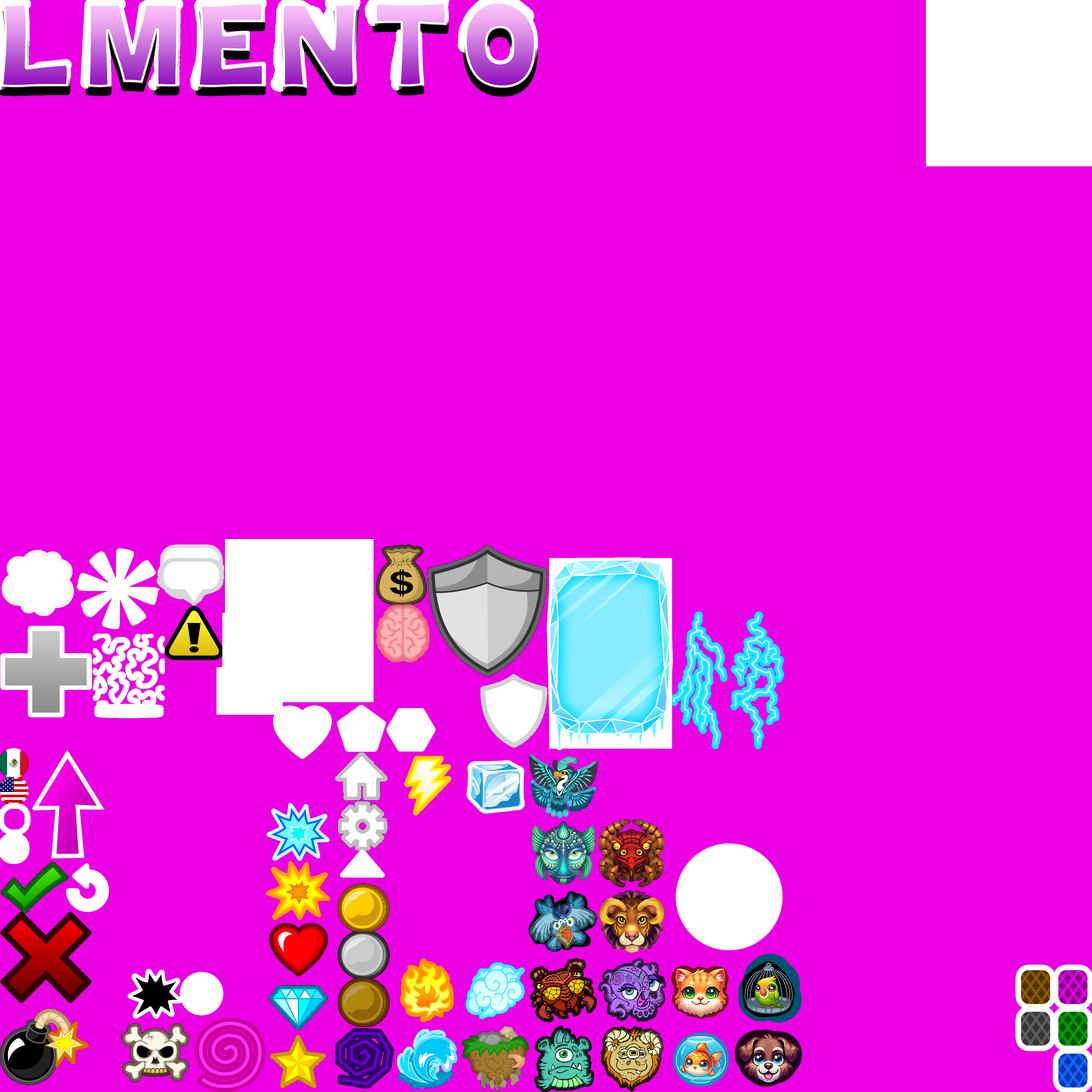
<style>
.page{position:relative;width:1092px;height:1092px;background:#eb00e3}
.page>*{position:absolute;margin:0}
.t1{font:119.3px "CaboldComicRegular";letter-spacing:0.1em}
</style>
<div class="page">
<p class="t1" style="left:1px;top:1px;width:535px;height:87px">LMENTO</p>
</div>
